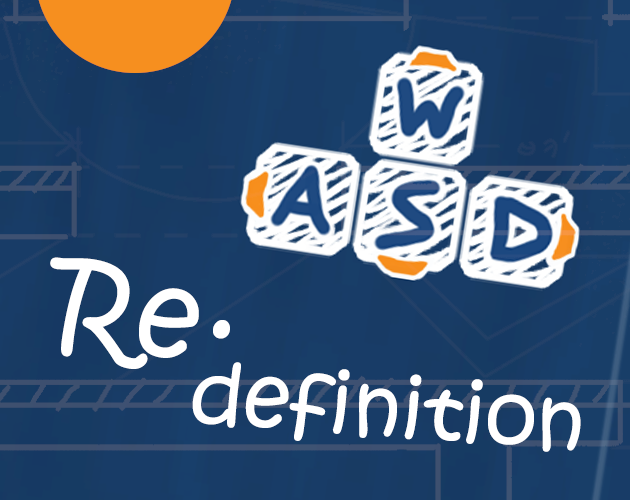
<style>
.page{position:relative;width:630px;height:500px}
.page>*{position:absolute;margin:0}
.t1{font:112.7px "KristenITC-Regular";color:#ffffff}
.t2{font:82.2px "KristenITC-Regular";color:#ffffff}
</style>
<div class="page">
<p class="t1" style="left:50px;top:257px;width:180px;height:112px;rotate:9deg">Re·</p>
<p class="t2" style="left:192px;top:362px;width:389px;height:90px;rotate:4deg">definition</p>
</div>
